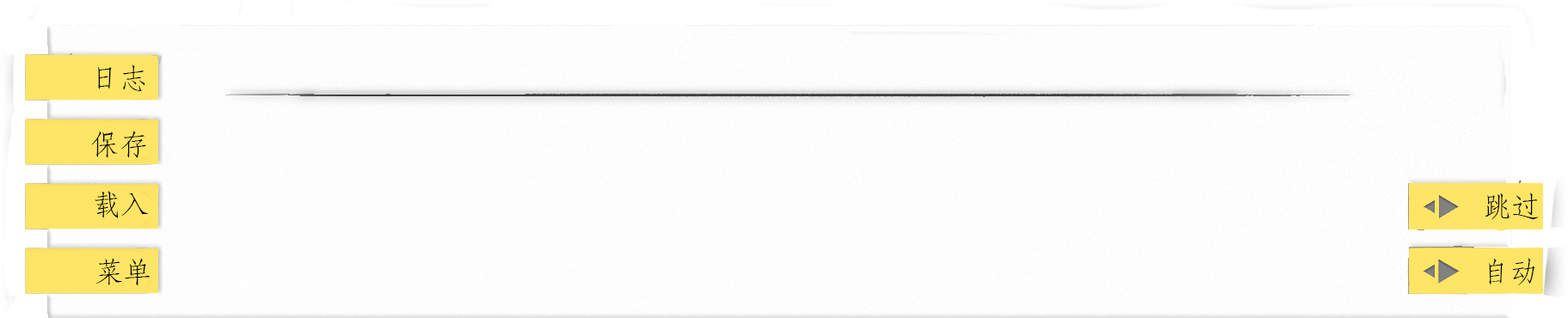
<style>
.page{position:relative;width:1568px;height:318px}
.page>*{position:absolute;margin:0}
.t1{font:28.7px "STFangsong";color:#000000}
.t2{font:28.7px "STFangsong";color:#010101}
</style>
<div class="page">
<p class="t1" style="left:98px;top:65px;width:47px;height:26px">日志</p>
<p class="t1" style="left:91px;top:131px;width:55px;height:27px">保存</p>
<p class="t1" style="left:95px;top:191px;width:53px;height:27px">载入</p>
<p class="t1" style="left:1485px;top:193px;width:54px;height:27px">跳过</p>
<p class="t1" style="left:96px;top:258px;width:55px;height:28px">菜单</p>
<p class="t2" style="left:1489px;top:258px;width:46px;height:28px">自动</p>
</div>
